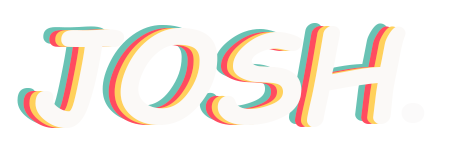
<style>
.page{position:relative;width:459px;height:150px;background:#ffffff}
.page>*{position:absolute;margin:0}
.t1{font:125px "ComicSansMS-BoldItalic"}
.t2{font:125px "ComicSansMS-BoldItalic";color:#fbf9f7}
.t3{font:125px "MicrosoftTaiLe-Bold";color:#fbfafa}
</style>
<div class="page">
<p class="t1" style="left:17px;top:23px;width:371px;height:102px">JOSH</p>
<p class="t1" style="left:23px;top:26px;width:371px;height:102px">JOSH</p>
<p class="t2" style="left:35px;top:26px;width:390px;height:102px">JOSH<span class="t3">.</span></p>
</div>
